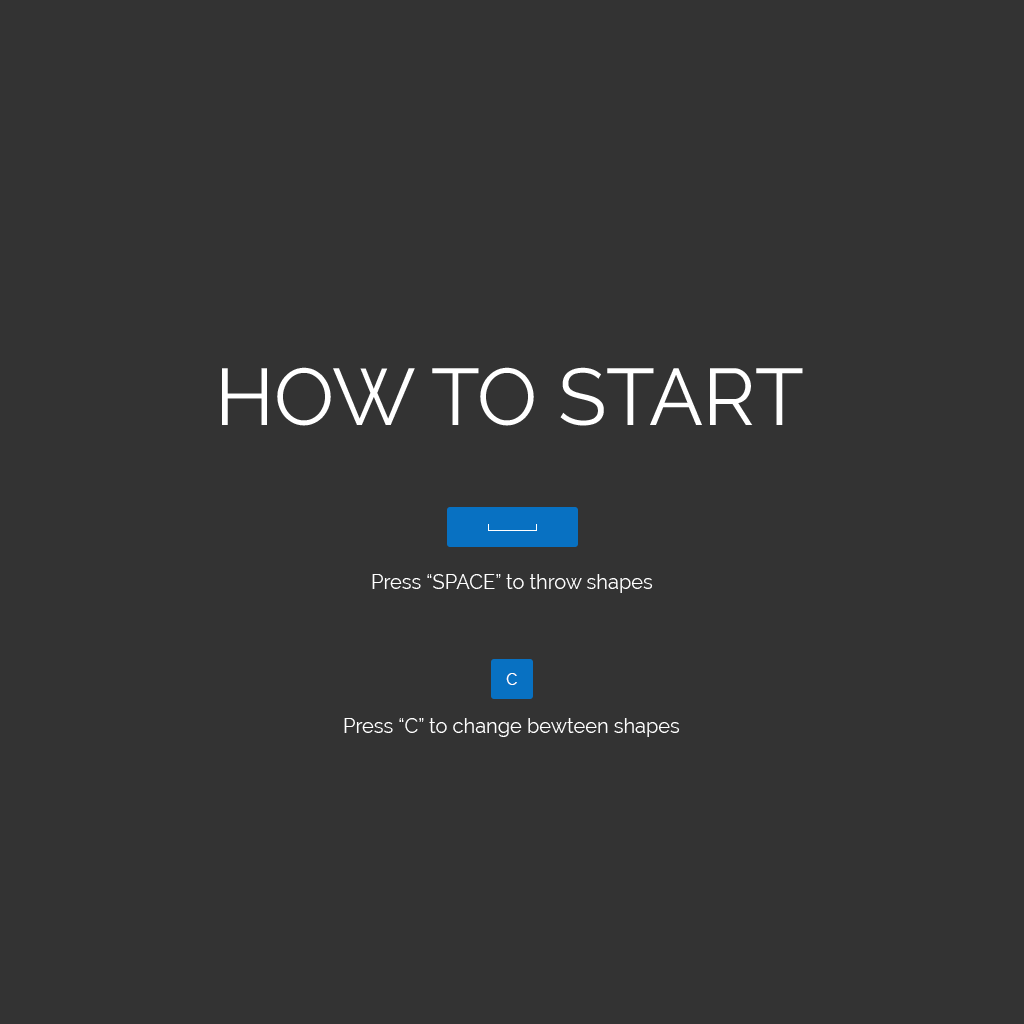
<style>
.page{position:relative;width:1024px;height:1024px;background:#333333}
.page>*{position:absolute;margin:0}
.t1{font:80px "Raleway-Regular";color:#ffffff}
.t2{font:20px "Raleway-Regular";color:#ffffff}
.t3{font:15.7px "Raleway-Regular";color:#ffffff}
</style>
<div class="page">
<p class="t1" style="left:222px;top:367px;width:581px;height:59px">HOW TO START</p>
<p class="t2" style="left:372px;top:574px;width:281px;height:19px">Press “SPACE” to throw shapes</p>
<p class="t3" style="left:506px;top:673px;width:11px;height:12px">C</p>
<p class="t2" style="left:344px;top:718px;width:336px;height:19px">Press “C” to change bewteen shapes</p>
</div>
